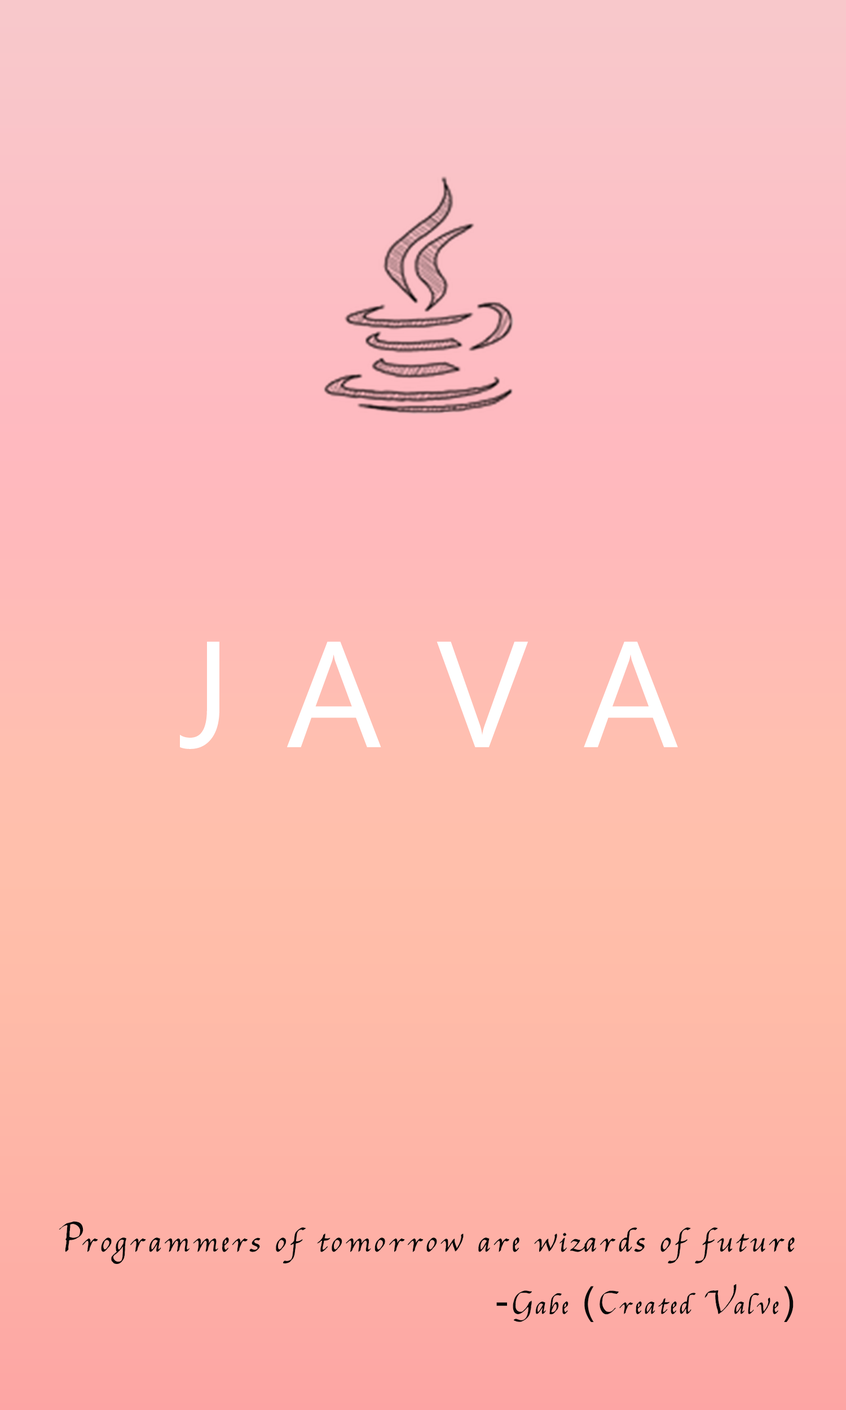
<style>
.page{position:relative;width:846px;height:1410px}
.page>*{position:absolute;margin:0}
.t1{font:150.4px "MicrosoftPhagsPa";letter-spacing:0.04em;color:#ffffff}
.t2{font:38.1px "GCursiv2";letter-spacing:0.12em;color:#090909}
.t3{font:33.1px "GCursiv2";letter-spacing:0.12em;color:#090909}
.t4{font:38.1px "ArialMT";letter-spacing:0.12em;color:#090909}
</style>
<div class="page">
<p class="t1" style="left:180px;top:641px;width:498px;height:108px">J A V A</p>
<p class="t2" style="left:59px;top:1221px;width:736px;height:43px">Programmers of tomorrow are wizards of future</p>
<p class="t3" style="left:496px;top:1284px;width:297px;height:38px"><span class="t4">-</span>Gabe<span class="t2">(</span><span class="t4">(</span>Created Valve<span class="t4">)</span></p>
</div>
